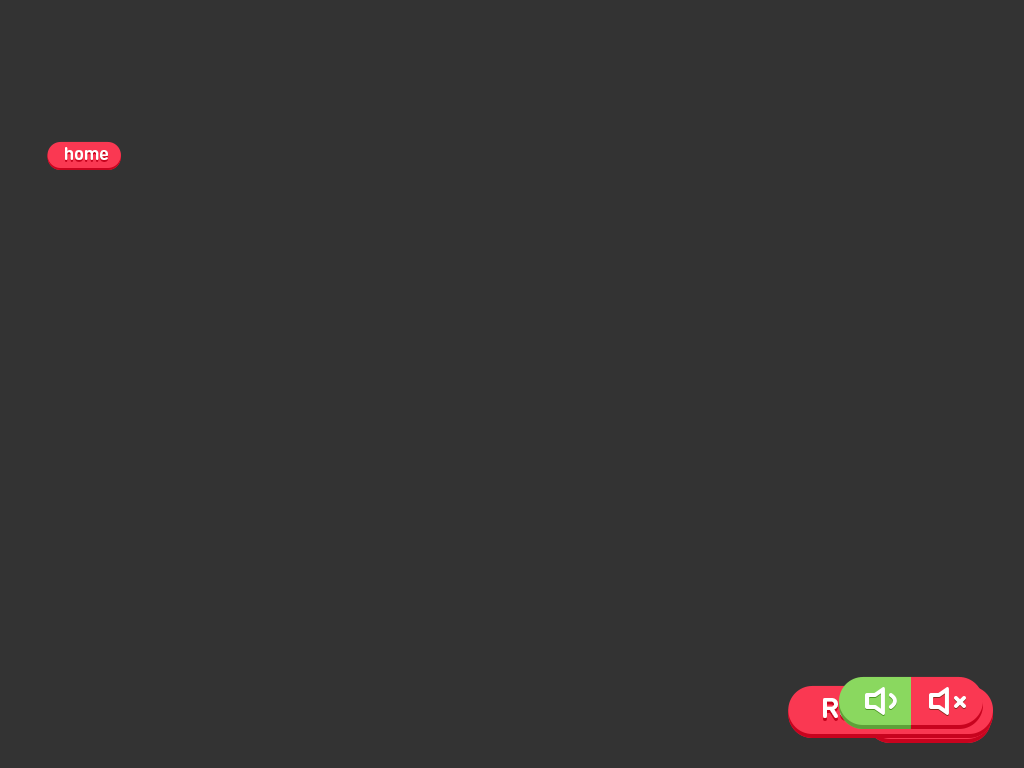
<style>
.page{position:relative;width:1024px;height:768px;background:#333333}
.page>*{position:absolute;margin:0}
.t1{font:18px "DINRoundPro-Bold"}
.t2{font:18px "DINRoundPro-Bold";color:#ffffff}
</style>
<div class="page">
<p class="t1" style="left:65px;top:149px;width:43px;height:13px">home</p>
<p class="t2" style="left:65px;top:147px;width:43px;height:13px">home</p>
</div>
